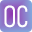
<style>
.page{position:relative;width:32px;height:32px}
.page>*{position:absolute;margin:0}
.t1{font:30px "Bahnschrift-LightCondensed";color:#ffffff}
</style>
<div class="page">
<p class="t1" style="left:4px;top:5px;width:24px;height:23px">OC</p>
</div>
